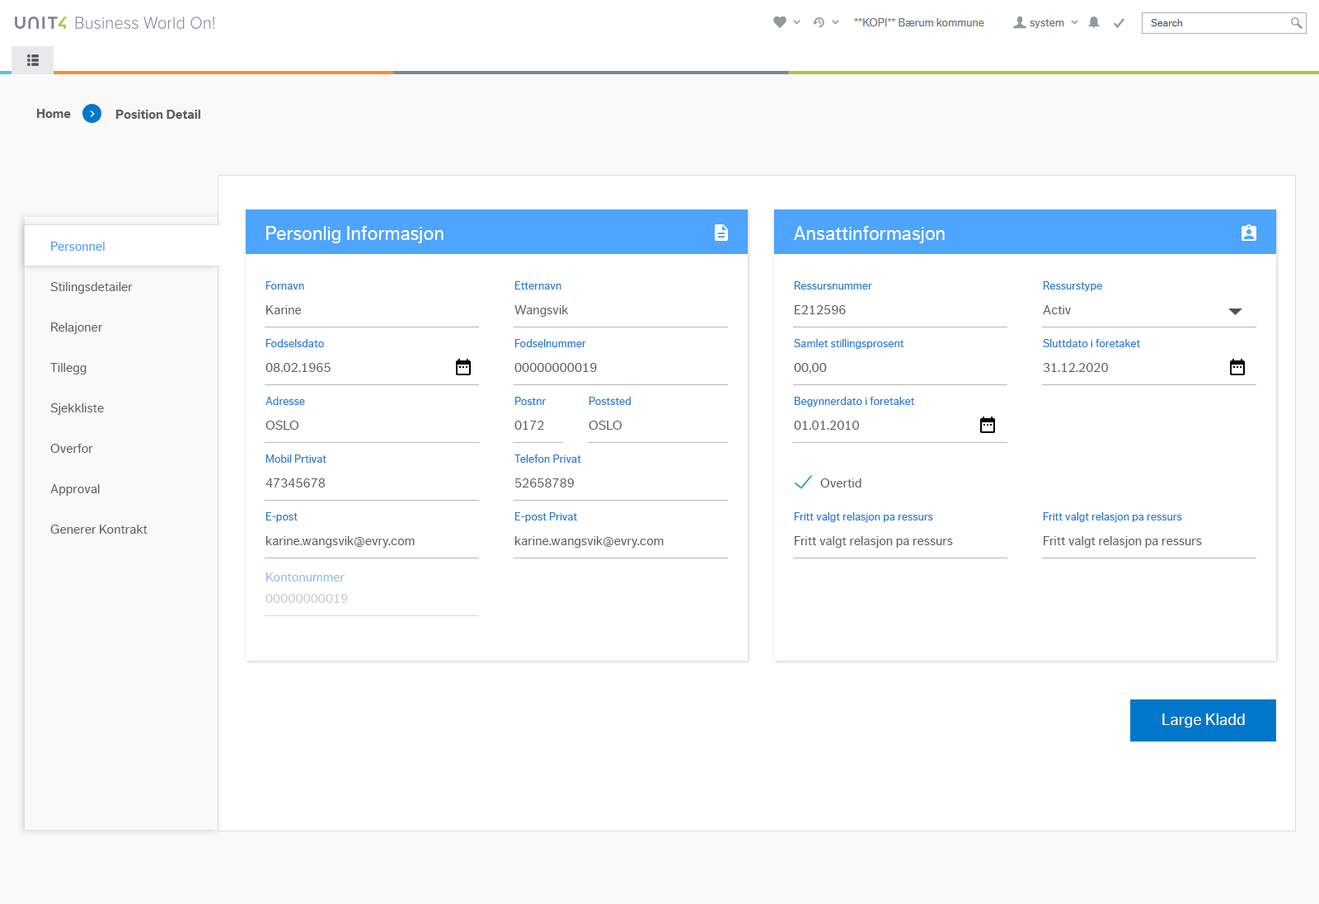
<style>
.page{position:relative;width:1319px;height:904px;background:#ffffff}
.page>*{position:absolute;margin:0}
.t1{font:13.2px "DagnyCompPro-Bold";color:#5e5e5e}
.t2{font:19.8px "DagnyCompPro";color:#ffffff}
.t3{font:13.2px/40.4px "DagnyCompPro";color:#5e5e5e}
.t4{font:13.2px/40.4px "DagnyCompPro";color:#449cf5}
.t5{font:11.5px "DagnyCompPro";color:#287cd1}
.t6{font:13.2px "DagnyCompPro";color:#5e5e5e}
.t7{font:13.2px "DagnyCompPro";color:#8fbbe7}
.t8{font:13.2px "DagnyCompPro";color:#c9c9c9}
.t9{font:16.5px "DagnyCompPro";color:#ffffff}
</style>
<div class="page">
<p class="t1" style="left:36px;top:109px;width:35px;height:9px">Home</p>
<p class="t1" style="left:115px;top:110px;width:85px;height:9px">Position Detail</p>
<p class="t2" style="left:266px;top:226px;width:178px;height:17px">Personlig Informasjon</p>
<p class="t2" style="left:794px;top:226px;width:151px;height:17px">Ansattinformasjon</p>
<p class="t3" style="left:50px;top:242px;width:98px;height:292px"><span class="t4">Personnel<br></span>Stilingsdetailer<br>Relajoner<br>Tillegg  <br>Sjekkliste<br>Overfor<br>Approval<br>Generer Kontrakt</p>
<p class="t5" style="left:266px;top:281px;width:38px;height:8px">Fornavn</p>
<p class="t5" style="left:515px;top:281px;width:47px;height:8px">Etternavn</p>
<p class="t5" style="left:794px;top:281px;width:78px;height:8px">Ressursnummer</p>
<p class="t5" style="left:1043px;top:281px;width:60px;height:10px">Ressurstype</p>
<p class="t6" style="left:266px;top:305px;width:36px;height:9px">Karine</p>
<p class="t6" style="left:515px;top:305px;width:54px;height:12px">Wangsvik</p>
<p class="t6" style="left:795px;top:305px;width:51px;height:9px">E212596</p>
<p class="t6" style="left:1043px;top:305px;width:28px;height:9px">Activ</p>
<p class="t5" style="left:266px;top:339px;width:58px;height:8px">Fodselsdato</p>
<p class="t5" style="left:515px;top:339px;width:71px;height:8px">Fodselnummer</p>
<p class="t5" style="left:794px;top:339px;width:111px;height:10px">Samlet stillingsprosent</p>
<p class="t5" style="left:1043px;top:339px;width:97px;height:8px">Sluttdato i foretaket</p>
<p class="t6" style="left:266px;top:363px;width:65px;height:9px">08.02.1965</p>
<p class="t6" style="left:515px;top:363px;width:82px;height:9px">00000000019</p>
<p class="t6" style="left:794px;top:363px;width:33px;height:11px">00,00</p>
<p class="t6" style="left:1044px;top:363px;width:65px;height:9px">31.12.2020</p>
<p class="t5" style="left:266px;top:397px;width:39px;height:8px">Adresse</p>
<p class="t5" style="left:515px;top:397px;width:32px;height:8px">Postnr</p>
<p class="t5" style="left:589px;top:397px;width:42px;height:8px">Poststed</p>
<p class="t5" style="left:794px;top:397px;width:121px;height:10px">Begynnerdato i foretaket</p>
<p class="t6" style="left:266px;top:421px;width:33px;height:9px">OSLO</p>
<p class="t6" style="left:515px;top:421px;width:29px;height:9px">0172</p>
<p class="t6" style="left:589px;top:421px;width:34px;height:9px">OSLO</p>
<p class="t6" style="left:794px;top:421px;width:66px;height:9px">01.01.2010</p>
<p class="t5" style="left:266px;top:454px;width:61px;height:9px">Mobil Prtivat</p>
<p class="t5" style="left:515px;top:454px;width:66px;height:9px">Telefon Privat</p>
<p class="t6" style="left:266px;top:478px;width:59px;height:9px">47345678</p>
<p class="t6" style="left:515px;top:478px;width:60px;height:9px">52658789</p>
<p class="t6" style="left:820px;top:478px;width:42px;height:9px">Overtid</p>
<p class="t5" style="left:266px;top:512px;width:32px;height:10px">E-post</p>
<p class="t5" style="left:515px;top:512px;width:62px;height:10px">E-post Privat</p>
<p class="t5" style="left:794px;top:512px;width:139px;height:10px">Fritt valgt relasjon pa ressurs</p>
<p class="t5" style="left:1043px;top:512px;width:139px;height:10px">Fritt valgt relasjon pa ressurs</p>
<p class="t6" style="left:266px;top:536px;width:149px;height:12px">karine.wangsvik@evry.com</p>
<p class="t6" style="left:515px;top:536px;width:149px;height:12px">karine.wangsvik@evry.com</p>
<p class="t6" style="left:795px;top:536px;width:158px;height:12px">Fritt valgt relasjon pa ressurs</p>
<p class="t6" style="left:1044px;top:536px;width:158px;height:12px">Fritt valgt relasjon pa ressurs</p>
<p class="t7" style="left:266px;top:572px;width:79px;height:9px">Kontonummer</p>
<p class="t8" style="left:266px;top:594px;width:82px;height:9px">00000000019</p>
<p class="t9" style="left:1163px;top:713px;width:82px;height:14px">Large Kladd</p>
</div>
